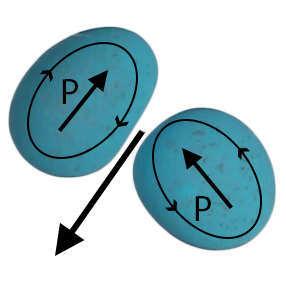
<style>
.page{position:relative;width:286px;height:286px;background:#ffffff}
.page>*{position:absolute;margin:0}
.t1{font:36px "MyriadPro-Regular";color:#000000}
</style>
<div class="page">
<p class="t1" style="left:62px;top:79px;width:16px;height:25px">P</p>
<p class="t1" style="left:195px;top:196px;width:16px;height:25px">P</p>
</div>
